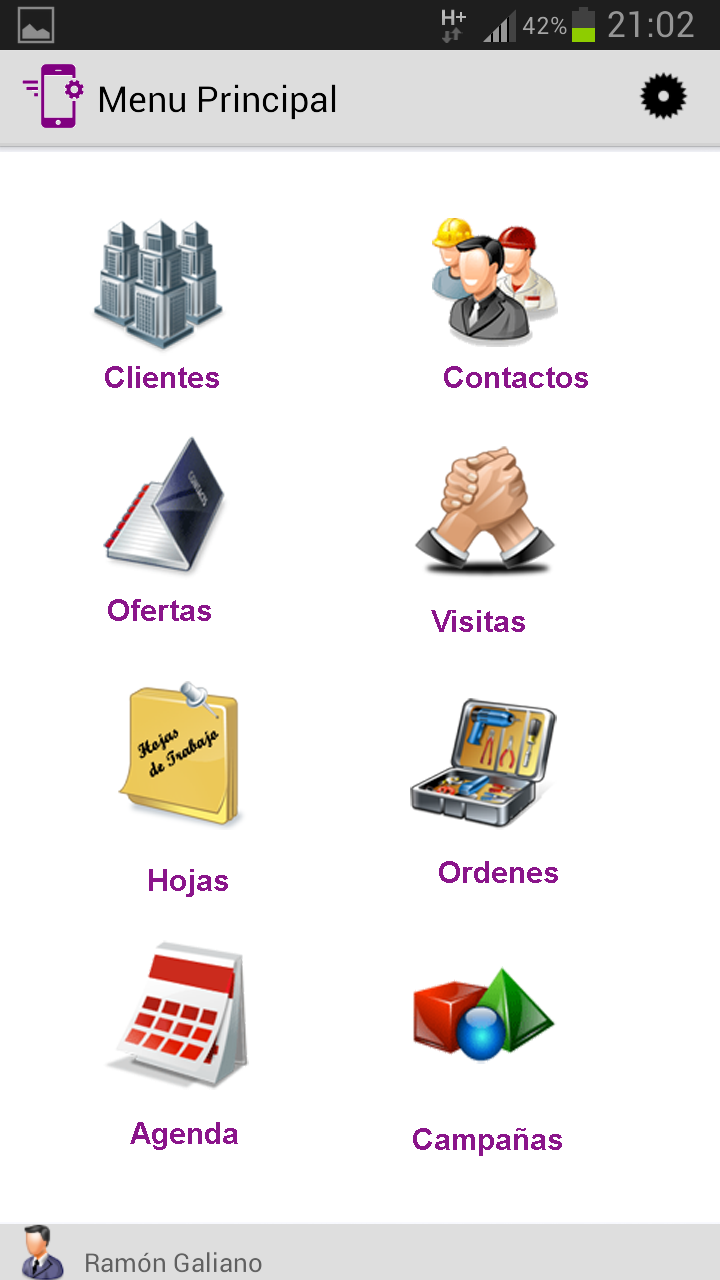
<style>
.page{position:relative;width:720px;height:1280px;background:#ffffff}
.page>*{position:absolute;margin:0}
.t1{font:30px "Arial-BoldMT";color:#8a158a}
</style>
<div class="page">
<p class="t1" style="left:105px;top:366px;width:114px;height:22px">Clientes</p>
<p class="t1" style="left:444px;top:366px;width:144px;height:22px">Contactos</p>
<p class="t1" style="left:108px;top:599px;width:103px;height:22px">Ofertas</p>
<p class="t1" style="left:431px;top:610px;width:94px;height:22px">Visitas</p>
<p class="t1" style="left:149px;top:869px;width:79px;height:28px">Hojas</p>
<p class="t1" style="left:439px;top:861px;width:119px;height:22px">Ordenes</p>
<p class="t1" style="left:130px;top:1122px;width:108px;height:28px">Agenda</p>
<p class="t1" style="left:413px;top:1128px;width:149px;height:28px">Campañas</p>
</div>
